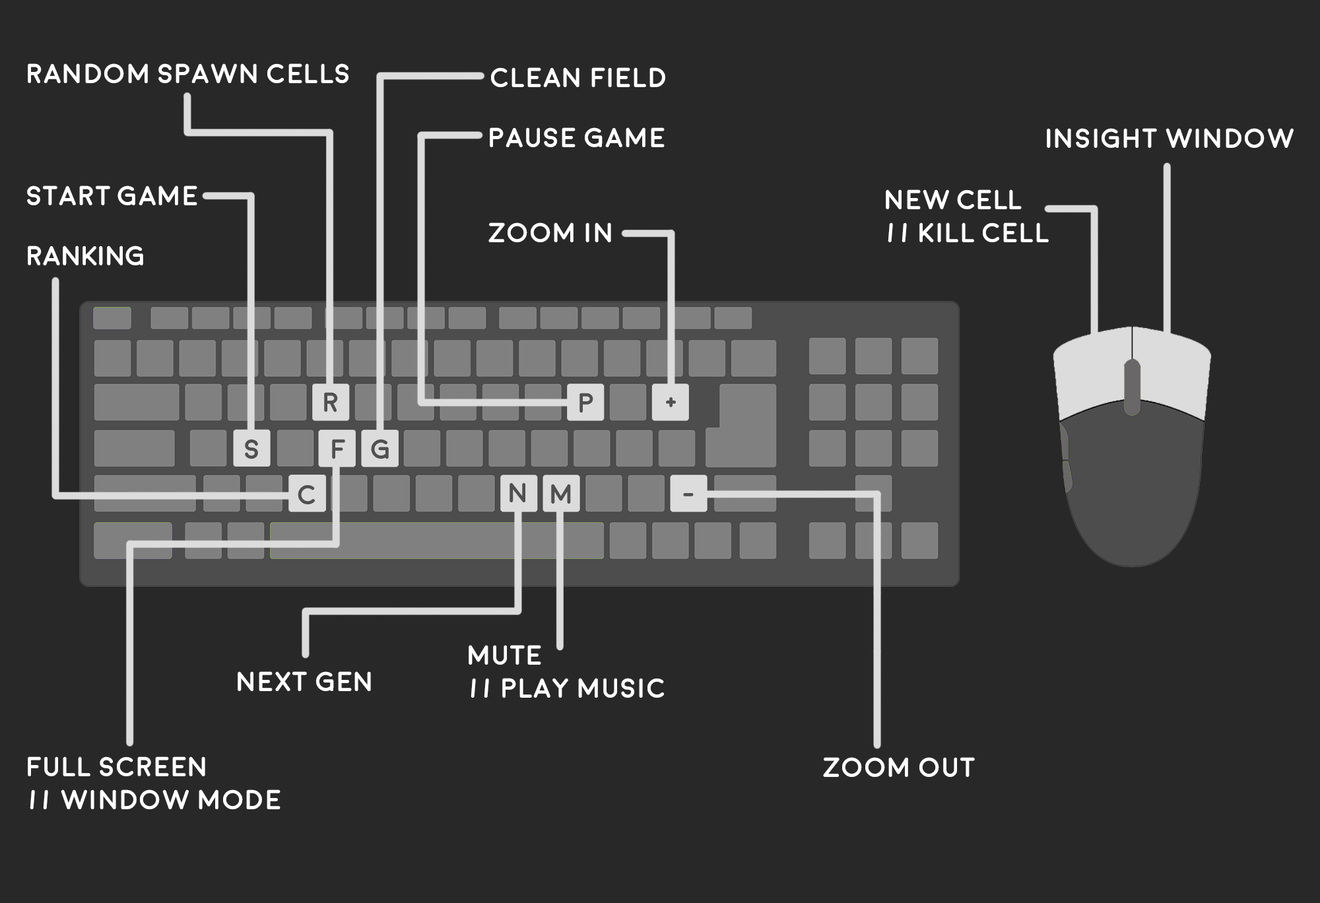
<style>
.page{position:relative;width:1320px;height:903px;background:#282828}
.page>*{position:absolute;margin:0}
.t1{font:27.5px "Moon-Bold";color:#ffffff}
.t2{font:27.5px "Moon-Bold";color:#505050}
</style>
<div class="page">
<p class="t1" style="left:28px;top:63px;width:321px;height:20px">Random Spawn cells</p>
<p class="t1" style="left:491px;top:67px;width:174px;height:20px">clean field</p>
<p class="t1" style="left:490px;top:127px;width:175px;height:20px">Pause game</p>
<p class="t1" style="left:1047px;top:128px;width:247px;height:20px">Insight window</p>
<p class="t1" style="left:27px;top:186px;width:170px;height:19px">Start Game</p>
<p class="t1" style="left:886px;top:189px;width:163px;height:53px">New CelL<br>// Kill cell</p>
<p class="t1" style="left:489px;top:222px;width:122px;height:20px">Zoom in</p>
<p class="t1" style="left:28px;top:246px;width:115px;height:19px">RANKING</p>
<p class="t2" style="left:324px;top:392px;width:14px;height:20px">R</p>
<p class="t2" style="left:580px;top:393px;width:13px;height:20px">P</p>
<p class="t2" style="left:666px;top:397px;width:10px;height:10px">+</p>
<p class="t2" style="left:245px;top:439px;width:13px;height:20px">S</p>
<p class="t2" style="left:332px;top:439px;width:13px;height:20px">F</p>
<p class="t2" style="left:371px;top:439px;width:18px;height:20px">G</p>
<p class="t2" style="left:298px;top:485px;width:17px;height:19px">C</p>
<p class="t2" style="left:510px;top:483px;width:15px;height:19px">N</p>
<p class="t2" style="left:551px;top:484px;width:20px;height:20px">M</p>
<p class="t2" style="left:683px;top:493px;width:11px;height:3px">-</p>
<p class="t1" style="left:469px;top:645px;width:195px;height:53px">Mute<br>// Play music</p>
<p class="t1" style="left:238px;top:671px;width:133px;height:20px">Next gen</p>
<p class="t1" style="left:28px;top:757px;width:253px;height:52px">Full screen<br>// window mode</p>
<p class="t1" style="left:823px;top:757px;width:152px;height:20px">Zoom out</p>
</div>
